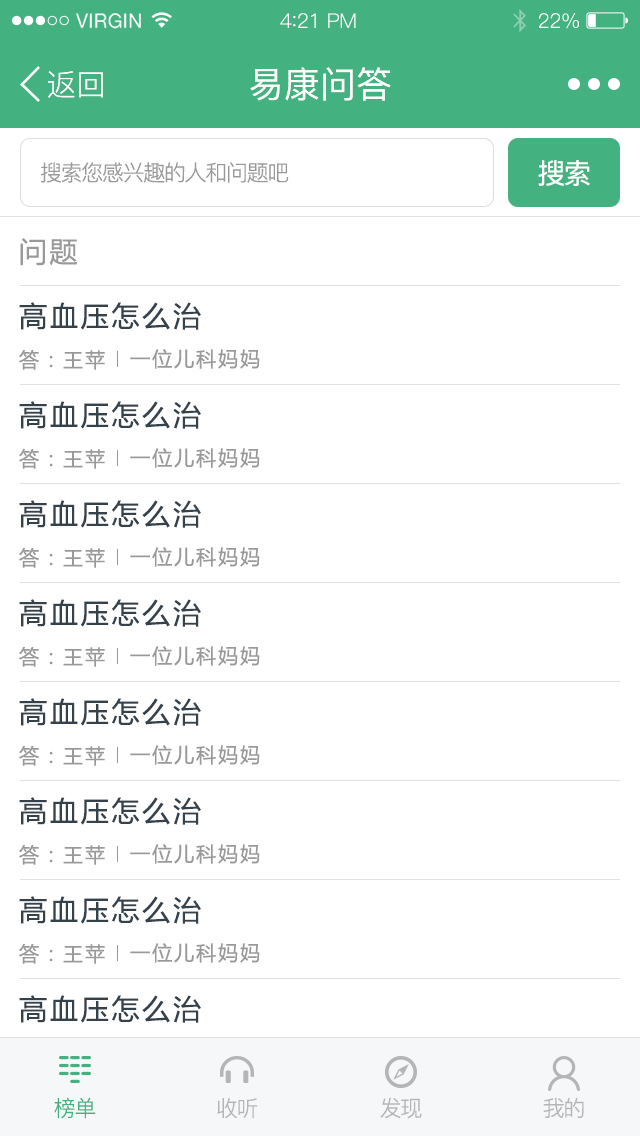
<style>
.page{position:relative;width:640px;height:1136px;background:#ffffff}
.page>*{position:absolute;margin:0}
.t1{font:19.6px "HelveticaNeue";letter-spacing:0.02em;color:#ffffff}
.t2{font:20.4px "PingFang-SC-Regular";letter-spacing:-0.02em;color:#ffffff}
.t3{font:22.1px "PingFang-SC-Regular";letter-spacing:-0.02em;color:#ffffff}
.t4{font:30px "PingFang-SC-Regular";color:#ffffff}
.t5{font:36px "PingFang-SC-Medium";color:#ffffff}
.t6{font:28px "PingFang-SC-Medium";letter-spacing:-0.06em;color:#ffffff}
.t7{font:22px "PingFang-SC-Regular";letter-spacing:-0.06em;color:#999999}
.t8{font:28px "MicrosoftYaHei";letter-spacing:0.1em;color:#999999}
.t9{font:28px "MicrosoftYaHei";letter-spacing:0.1em;color:#35424b}
.t10{font:20px "MicrosoftYaHei";letter-spacing:0.1em;color:#999999}
.t11{font:22px "PingFang-SC-Regular";letter-spacing:-0.06em;color:#44b181}
.t12{font:22px "PingFang-SC-Regular";letter-spacing:-0.06em;color:#b4b5b6}
</style>
<div class="page">
<p class="t1" style="left:76px;top:13px;width:65px;height:16px">VIRGIN</p>
<p class="t2" style="left:280px;top:13px;width:76px;height:15px">4<span class="t3">:</span>21 PM</p>
<p class="t2" style="left:539px;top:13px;width:40px;height:16px">22%</p>
<p class="t4" style="left:48px;top:71px;width:55px;height:27px">返回</p>
<p class="t5" style="left:250px;top:67px;width:141px;height:34px">易康问答</p>
<p class="t6" style="left:538px;top:160px;width:52px;height:26px">搜索</p>
<p class="t7" style="left:40px;top:162px;width:249px;height:21px">搜索您感兴趣的人和问题吧</p>
<p class="t8" style="left:20px;top:238px;width:58px;height:28px">问题</p>
<p class="t9" style="left:19px;top:302px;width:182px;height:28px">高血压怎么治</p>
<p class="t10" style="left:19px;top:350px;width:86px;height:20px">答：王苹</p>
<p class="t10" style="left:130px;top:349px;width:130px;height:20px">一位儿科妈妈</p>
<p class="t9" style="left:19px;top:401px;width:182px;height:28px">高血压怎么治</p>
<p class="t10" style="left:19px;top:449px;width:86px;height:20px">答：王苹</p>
<p class="t10" style="left:130px;top:448px;width:130px;height:20px">一位儿科妈妈</p>
<p class="t9" style="left:19px;top:500px;width:182px;height:28px">高血压怎么治</p>
<p class="t10" style="left:19px;top:548px;width:86px;height:20px">答：王苹</p>
<p class="t10" style="left:130px;top:547px;width:130px;height:20px">一位儿科妈妈</p>
<p class="t9" style="left:19px;top:599px;width:182px;height:28px">高血压怎么治</p>
<p class="t10" style="left:19px;top:647px;width:86px;height:20px">答：王苹</p>
<p class="t10" style="left:130px;top:646px;width:130px;height:20px">一位儿科妈妈</p>
<p class="t9" style="left:19px;top:698px;width:182px;height:28px">高血压怎么治</p>
<p class="t10" style="left:19px;top:746px;width:86px;height:20px">答：王苹</p>
<p class="t10" style="left:130px;top:745px;width:130px;height:20px">一位儿科妈妈</p>
<p class="t9" style="left:19px;top:797px;width:182px;height:28px">高血压怎么治</p>
<p class="t10" style="left:19px;top:845px;width:86px;height:20px">答：王苹</p>
<p class="t10" style="left:130px;top:844px;width:130px;height:20px">一位儿科妈妈</p>
<p class="t9" style="left:19px;top:896px;width:182px;height:28px">高血压怎么治</p>
<p class="t10" style="left:19px;top:944px;width:86px;height:20px">答：王苹</p>
<p class="t10" style="left:130px;top:943px;width:130px;height:20px">一位儿科妈妈</p>
<p class="t9" style="left:19px;top:995px;width:182px;height:28px">高血压怎么治</p>
<p class="t11" style="left:54px;top:1097px;width:42px;height:22px">榜单</p>
<p class="t12" style="left:380px;top:1097px;width:42px;height:22px">发现</p>
<p class="t12" style="left:543px;top:1097px;width:41px;height:21px">我的</p>
<p class="t12" style="left:217px;top:1098px;width:41px;height:21px">收听</p>
</div>
